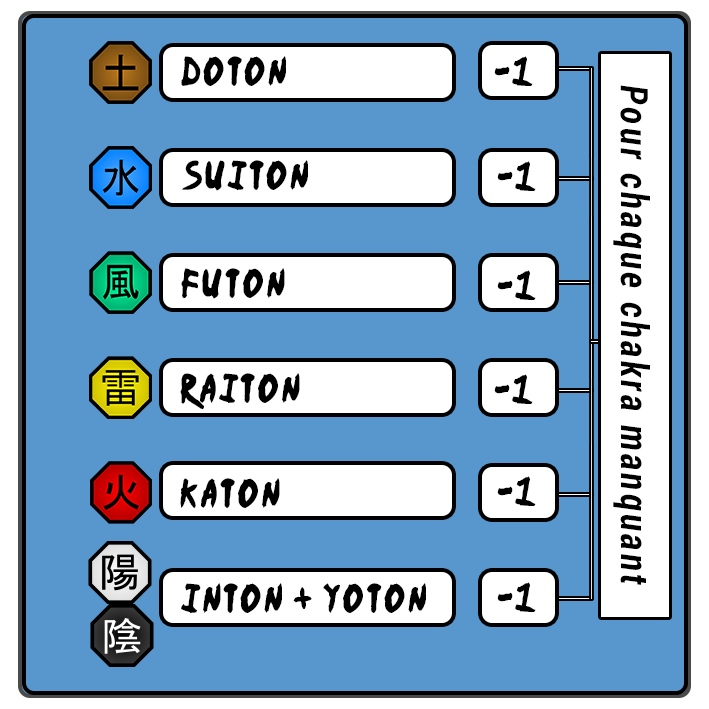
<style>
.page{position:relative;width:709px;height:709px;background:#5897cd}
.page>*{position:absolute;margin:0}
.t1{font:32.8px "Ninja-Naruto";letter-spacing:0.1em;color:#000000;scale:0.9 1}
.t2{font:38px "Roboto-BoldCondensedItalic";letter-spacing:0.1em;color:#000000;scale:0.9 1}
</style>
<div class="page">
<p class="t1" style="left:181px;top:56px;width:105px;height:30px">Doton</p>
<p class="t1" style="left:494px;top:56px;width:39px;height:30px">-1</p>
<p class="t2" style="left:613px;top:85px;width:37px;height:500px;rotate:90deg">Pour chaque chakra manquant</p>
<p class="t1" style="left:182px;top:160px;width:126px;height:31px">Suiton</p>
<p class="t1" style="left:497px;top:161px;width:39px;height:30px">-1</p>
<p class="t1" style="left:181px;top:268px;width:104px;height:31px">Futon</p>
<p class="t1" style="left:497px;top:270px;width:39px;height:30px">-1</p>
<p class="t1" style="left:180px;top:373px;width:120px;height:36px">Raiton</p>
<p class="t1" style="left:494px;top:374px;width:39px;height:30px">-1</p>
<p class="t1" style="left:180px;top:478px;width:100px;height:30px">Katon</p>
<p class="t1" style="left:497px;top:476px;width:39px;height:30px">-1</p>
<p class="t1" style="left:497px;top:582px;width:39px;height:30px">-1</p>
<p class="t1" style="left:181px;top:583px;width:245px;height:30px">Inton + YOton</p>
</div>
